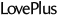
<style>
.page{position:relative;width:58px;height:16px;background:#ffffff}
.page>*{position:absolute;margin:0}
.t1{font:17.3px "Amira-Roman";letter-spacing:-0.046em;color:#000000}
</style>
<div class="page">
<p class="t1" style="left:1px;top:1px;width:56px;height:14px;opacity:0.96">LovePlus</p>
</div>
